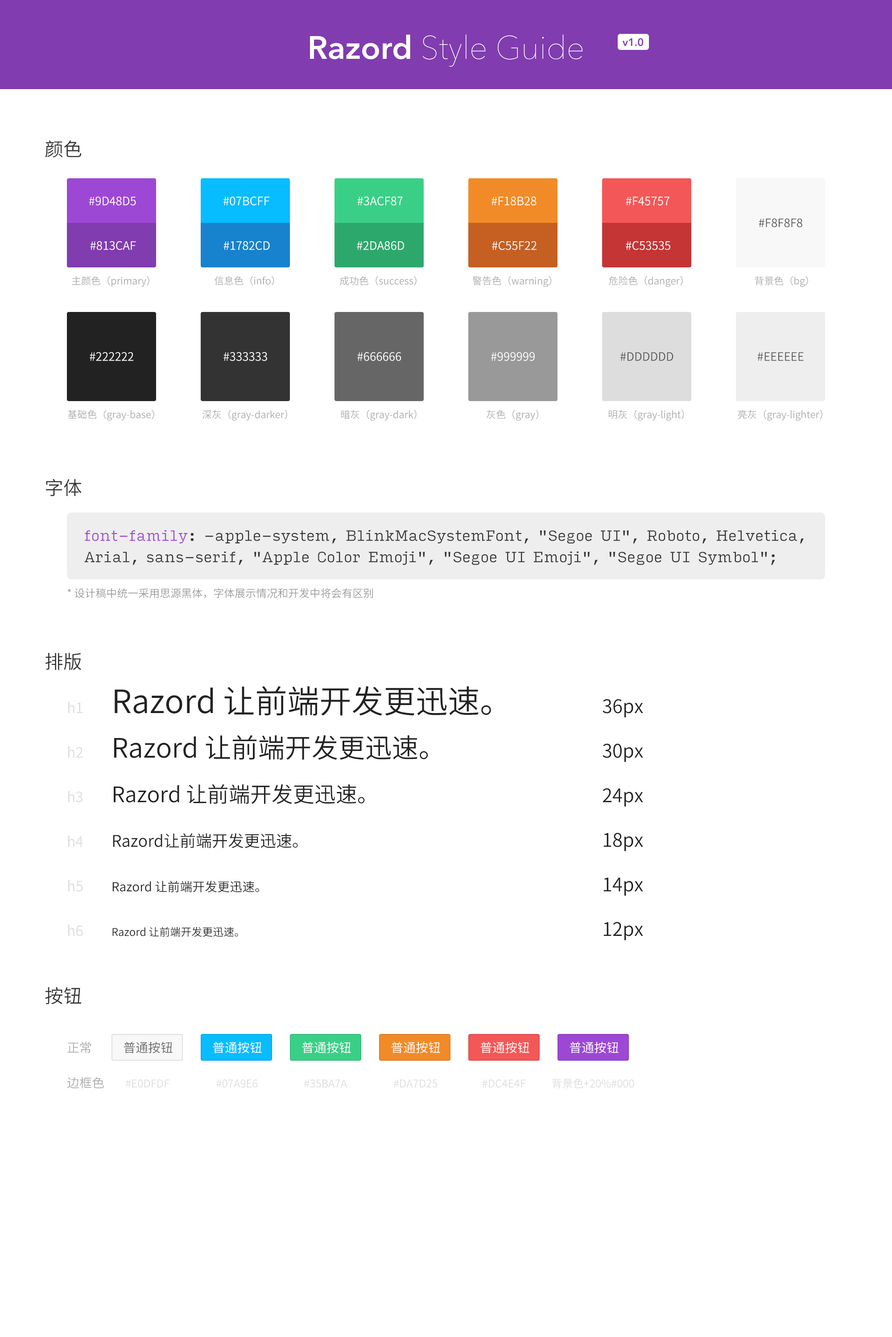
<style>
.page{position:relative;width:892px;height:1337px;background:#ffffff}
.page>*{position:absolute;margin:0}
.t1{font:32.1px "AvenirNext-UltraLight";color:#ffffff}
.t2{font:32.1px "AvenirNext-DemiBold";color:#ffffff}
.t3{font:10.7px "AvenirNext-DemiBold";color:#813caf}
.t4{font:18.7px "SourceHanSansCN-Normal";color:#333333}
.t5{font:11.6px "SourceHanSansCN-Normal";color:#ffffff}
.t6{font:11.6px "SourceHanSansCN-Normal";color:#555555}
.t7{font:9.8px "SourceHanSansCN-Normal";color:#aaaaaa}
.t8{font:14.3px/21.4px "InputSerif-Light";letter-spacing:-0.04em;color:#333333}
.t9{font:14.3px/21.4px "InputSerif-Light";letter-spacing:-0.04em;color:#9d48d5}
.t10{font:10.7px "SourceHanSansCN-Normal";color:#999999}
.t11{font:32.1px "SourceHanSansCN-Normal";color:#222222}
.t12{font:14.3px "SourceHanSansCN-Normal";color:#dddddd}
.t13{font:18.7px "SourceHanSansCN-Normal";color:#222222}
.t14{font:26.7px "SourceHanSansCN-Normal";color:#222222}
.t15{font:21.4px "SourceHanSansCN-Normal";color:#222222}
.t16{font:16px "SourceHanSansCN-Normal";color:#222222}
.t17{font:12.5px "SourceHanSansCN-Normal";color:#222222}
.t18{font:10.7px "SourceHanSansCN-Normal";color:#222222}
.t19{font:12.5px "SourceHanSansCN-Normal";color:#aaaaaa}
.t20{font:12.5px "SourceHanSansCN-Normal";color:#666666}
.t21{font:12.5px "SourceHanSansCN-Normal";color:#ffffff}
.t22{font:10.7px "SourceHanSansCN-Normal";color:#dddddd}
</style>
<div class="page">
<p class="t1" style="left:310px;top:34px;width:272px;height:33px"><span class="t2">Razord</span> Style Guide</p>
<p class="t3" style="left:622px;top:38px;width:21px;height:8px">v1.0</p>
<p class="t4" style="left:45px;top:140px;width:37px;height:18px">颜色</p>
<p class="t5" style="left:89px;top:197px;width:47px;height:9px">#9D48D5</p>
<p class="t5" style="left:223px;top:197px;width:46px;height:9px">#07BCFF</p>
<p class="t5" style="left:357px;top:197px;width:46px;height:9px">#3ACF87</p>
<p class="t5" style="left:491px;top:197px;width:45px;height:9px">#F18B28</p>
<p class="t5" style="left:625px;top:197px;width:44px;height:9px">#F45757</p>
<p class="t6" style="left:758px;top:218px;width:44px;height:9px">#F8F8F8</p>
<p class="t5" style="left:90px;top:241px;width:46px;height:9px">#813CAF</p>
<p class="t5" style="left:223px;top:241px;width:47px;height:9px">#1782CD</p>
<p class="t5" style="left:357px;top:241px;width:47px;height:9px">#2DA86D</p>
<p class="t5" style="left:492px;top:241px;width:44px;height:9px">#C55F22</p>
<p class="t5" style="left:625px;top:241px;width:45px;height:9px">#C53535</p>
<p class="t7" style="left:72px;top:276px;width:77px;height:11px">主颜色（primary）</p>
<p class="t7" style="left:214px;top:276px;width:60px;height:10px">信息色（info）</p>
<p class="t7" style="left:340px;top:276px;width:76px;height:10px">成功色（success）</p>
<p class="t7" style="left:472px;top:276px;width:79px;height:11px">警告色（warning）</p>
<p class="t7" style="left:609px;top:276px;width:74px;height:11px">危险色（danger）</p>
<p class="t7" style="left:754px;top:276px;width:54px;height:11px">背景色（bg）</p>
<p class="t5" style="left:90px;top:352px;width:43px;height:9px">#222222</p>
<p class="t5" style="left:223px;top:352px;width:44px;height:9px">#333333</p>
<p class="t5" style="left:357px;top:352px;width:44px;height:9px">#666666</p>
<p class="t5" style="left:491px;top:352px;width:44px;height:9px">#999999</p>
<p class="t6" style="left:620px;top:352px;width:53px;height:9px">#DDDDDD</p>
<p class="t6" style="left:757px;top:352px;width:46px;height:9px">#EEEEEE</p>
<p class="t7" style="left:68px;top:410px;width:86px;height:11px">基础色（gray-base）</p>
<p class="t7" style="left:202px;top:410px;width:85px;height:11px">深灰（gray-darker）</p>
<p class="t7" style="left:341px;top:410px;width:75px;height:11px">暗灰（gray-dark）</p>
<p class="t7" style="left:486px;top:410px;width:52px;height:11px">灰色（gray）</p>
<p class="t7" style="left:609px;top:410px;width:75px;height:11px">明灰（gray-light）</p>
<p class="t7" style="left:737px;top:410px;width:85px;height:11px">亮灰（gray-lighter）</p>
<p class="t4" style="left:46px;top:479px;width:36px;height:18px">字体</p>
<p class="t8" style="left:84px;top:530px;width:719px;height:35px"><span class="t9">font-family</span>: -apple-system, BlinkMacSystemFont, "Segoe UI", Roboto, Helvetica, <br>Arial, sans-serif, "Apple Color Emoji", "Segoe UI Emoji", "Segoe UI Symbol";</p>
<p class="t10" style="left:67px;top:588px;width:306px;height:11px">* 设计稿中统一采用思源黑体，字体展示情况和开发中将会有区别</p>
<p class="t4" style="left:45px;top:653px;width:36px;height:17px">排版</p>
<p class="t11" style="left:115px;top:686px;width:376px;height:30px">Razord 让前端开发更迅速。</p>
<p class="t12" style="left:68px;top:702px;width:14px;height:11px">h1</p>
<p class="t13" style="left:602px;top:699px;width:41px;height:19px">36px</p>
<p class="t14" style="left:114px;top:735px;width:314px;height:25px">Razord 让前端开发更迅速。</p>
<p class="t12" style="left:68px;top:746px;width:15px;height:12px">h2</p>
<p class="t13" style="left:602px;top:744px;width:41px;height:18px">30px</p>
<p class="t15" style="left:114px;top:784px;width:251px;height:20px">Razord 让前端开发更迅速。</p>
<p class="t12" style="left:68px;top:791px;width:14px;height:12px">h3</p>
<p class="t13" style="left:602px;top:788px;width:41px;height:19px">24px</p>
<p class="t16" style="left:113px;top:833px;width:185px;height:15px">Razord让前端开发更迅速。</p>
<p class="t13" style="left:603px;top:833px;width:40px;height:18px">18px</p>
<p class="t12" style="left:68px;top:835px;width:15px;height:12px">h4</p>
<p class="t12" style="left:68px;top:880px;width:14px;height:12px">h5</p>
<p class="t17" style="left:112px;top:881px;width:147px;height:12px">Razord 让前端开发更迅速。</p>
<p class="t13" style="left:603px;top:878px;width:40px;height:18px">14px</p>
<p class="t12" style="left:68px;top:925px;width:15px;height:12px">h6</p>
<p class="t18" style="left:112px;top:927px;width:126px;height:10px">Razord 让前端开发更迅速。</p>
<p class="t13" style="left:603px;top:922px;width:40px;height:19px">12px</p>
<p class="t4" style="left:45px;top:987px;width:36px;height:18px">按钮</p>
<p class="t19" style="left:67px;top:1042px;width:24px;height:12px">正常</p>
<p class="t20" style="left:123px;top:1042px;width:50px;height:12px">普通按钮</p>
<p class="t21" style="left:213px;top:1042px;width:49px;height:12px">普通按钮</p>
<p class="t21" style="left:302px;top:1042px;width:49px;height:12px">普通按钮</p>
<p class="t21" style="left:391px;top:1042px;width:49px;height:12px">普通按钮</p>
<p class="t21" style="left:480px;top:1042px;width:49px;height:12px">普通按钮</p>
<p class="t21" style="left:569px;top:1042px;width:49px;height:12px">普通按钮</p>
<p class="t19" style="left:67px;top:1077px;width:37px;height:12px">边框色</p>
<p class="t22" style="left:126px;top:1080px;width:43px;height:8px">#E0DFDF</p>
<p class="t22" style="left:216px;top:1080px;width:42px;height:8px">#07A9E6</p>
<p class="t22" style="left:304px;top:1080px;width:43px;height:8px">#35BA7A</p>
<p class="t22" style="left:393px;top:1080px;width:44px;height:8px">#DA7D25</p>
<p class="t22" style="left:482px;top:1080px;width:44px;height:8px">#DC4E4F</p>
<p class="t22" style="left:552px;top:1079px;width:82px;height:10px">背景色+20%#000</p>
</div>
